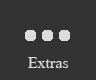
<style>
.page{position:relative;width:96px;height:80px;background:#333333}
.page>*{position:absolute;margin:0}
.t1{font:24px "AngsanaUPC";color:#dddbdb}
</style>
<div class="page">
<p class="t1" style="left:28px;top:57px;width:41px;height:11px">Extras</p>
</div>
